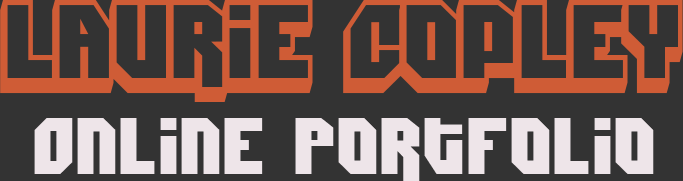
<style>
.page{position:relative;width:683px;height:181px;background:#333333}
.page>*{position:absolute;margin:0}
.t1{font:105px "DimitriSwank";color:#cf5c36}
.t2{font:80px "Dimitri";color:#eee5e9}
</style>
<div class="page">
<p class="t1" style="left:0px;top:0px;width:683px;height:102px">Laurie Copley</p>
<p class="t2" style="left:34px;top:118px;width:620px;height:63px">Online Portfolio</p>
</div>
